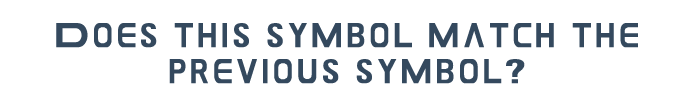
<style>
.page{position:relative;width:700px;height:100px;background:#ffffff}
.page>*{position:absolute;margin:0}
.t1{font:30px "GAMECUBENDualSet";color:#34495e}
.t2{font:14px "GAMECUBENDualSet";color:#34495e}
</style>
<div class="page">
<p class="t1" style="left:56px;top:23px;width:582px;height:61px;text-align:center"><span class="t2"><br></span>Does this symbol match the previous symbol?</p>
</div>
